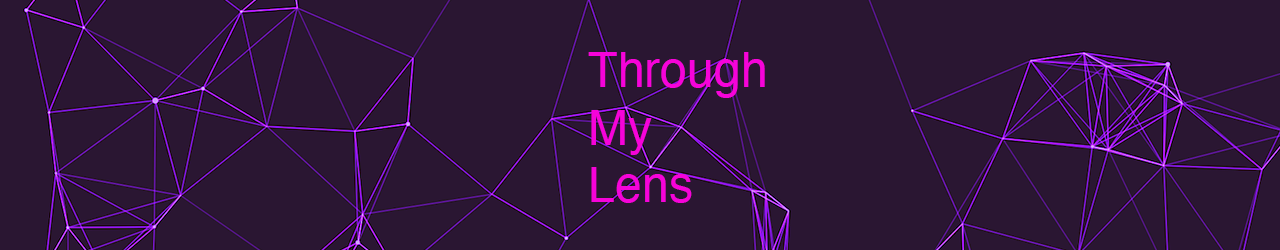
<style>
.page{position:relative;width:1280px;height:250px;background:#2a1632}
.page>*{position:absolute;margin:0}
.t1{font:48px "Helvetica";color:#f603d9}
</style>
<div class="page">
<p class="t1" style="left:588px;top:52px;width:177px;height:151px">Through <br>My<br>Lens</p>
</div>
